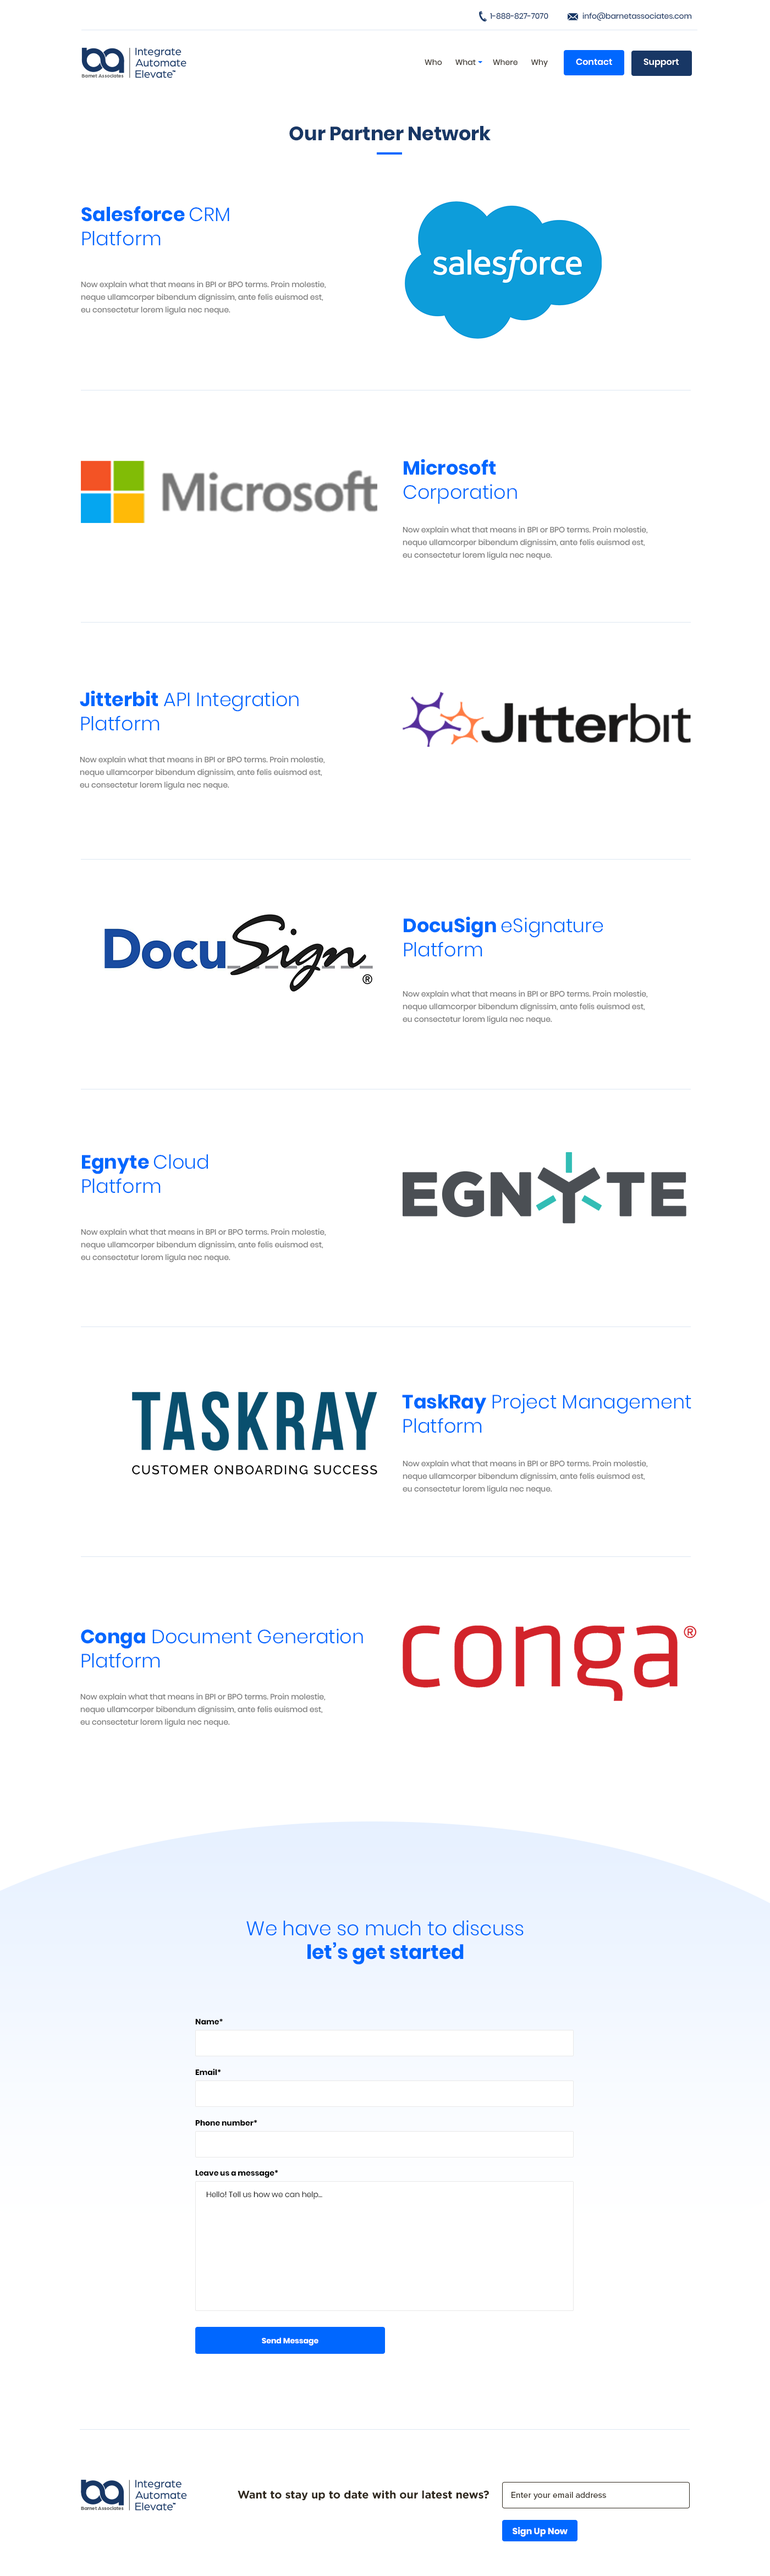
<style>
.page{position:relative;width:770px;height:2576px;background:#ffffff}
.page>*{position:absolute;margin:0}
.t1{font:7.7px "Poppins-Regular";color:#183765}
.t2{font:7.7px "Poppins-Regular";color:#2f281e}
.t3{font:8.8px "Poppins-SemiBold";color:#ffffff}
.t4{font:19.2px "Poppins-Bold";color:#183765}
.t5{font:19.2px/24.2px "Poppins-Light";color:#0067ff}
.t6{font:19.2px/24.2px "Poppins-Bold";color:#0067ff}
.t7{font:7.7px/12.6px "Poppins-Regular";color:#737373}
.t8{font:19.8px "Poppins-Light";color:#0067ff}
.t9{font:19.8px "Poppins-Bold";color:#0067ff}
.t10{font:7.7px "Poppins-Bold";color:#000000}
.t11{font:7.7px "Poppins-Light";color:#000000}
.t12{font:7.7px "Poppins-Bold";color:#ffffff}
.t13{font:11px "Gotham-Bold";color:#2f281e}
.t14{font:8.8px "ProximaNova-Regular";color:#2f281e}
.t15{font:8.8px "Poppins-Bold";color:#ffffff}
</style>
<div class="page">
<p class="t1" style="left:490px;top:13px;width:58px;height:6px">1-888-827-7070</p>
<p class="t1" style="left:582px;top:12px;width:110px;height:9px">info@barnetassociates.com</p>
<p class="t2" style="left:425px;top:59px;width:123px;height:8px">Who       What         Where       Why</p>
<p class="t3" style="left:576px;top:58px;width:36px;height:7px">Contact</p>
<p class="t3" style="left:643px;top:58px;width:36px;height:10px">Support</p>
<p class="t4" style="left:289px;top:126px;width:202px;height:15px">Our Partner Network</p>
<p class="t5" style="left:81px;top:206px;width:148px;height:40px"><span class="t6">Salesforce </span>CRM <br>Platform</p>
<p class="t7" style="left:81px;top:281px;width:245px;height:34px">Now explain what that means in BPI or BPO terms. Proin molestie, neque ullamcorper bibendum dignissim, ante felis euismod est, eu consectetur lorem ligula nec neque.</p>
<p class="t5" style="left:403px;top:459px;width:114px;height:45px"><span class="t6">Microsoft</span> <br>Corporation</p>
<p class="t7" style="left:403px;top:526px;width:245px;height:34px">Now explain what that means in BPI or BPO terms. Proin molestie, neque ullamcorper bibendum dignissim, ante felis euismod est, eu consectetur lorem ligula nec neque.</p>
<p class="t5" style="left:80px;top:690px;width:219px;height:41px"><span class="t6">Jitterbit</span> API Integration Platform</p>
<p class="t7" style="left:80px;top:756px;width:245px;height:34px">Now explain what that means in BPI or BPO terms. Proin molestie, neque ullamcorper bibendum dignissim, ante felis euismod est, eu consectetur lorem ligula nec neque.</p>
<p class="t5" style="left:404px;top:916px;width:199px;height:41px"><span class="t6">DocuSign </span>eSignature Platform</p>
<p class="t7" style="left:403px;top:990px;width:245px;height:34px">Now explain what that means in BPI or BPO terms. Proin molestie, neque ullamcorper bibendum dignissim, ante felis euismod est, eu consectetur lorem ligula nec neque.</p>
<p class="t5" style="left:82px;top:1154px;width:126px;height:39px"><span class="t6">Egnyte </span>Cloud<br>Platform</p>
<p class="t7" style="left:81px;top:1229px;width:245px;height:33px">Now explain what that means in BPI or BPO terms. Proin molestie, neque ullamcorper bibendum dignissim, ante felis euismod est, eu consectetur lorem ligula nec neque.</p>
<p class="t5" style="left:402px;top:1394px;width:289px;height:39px"><span class="t6">TaskRay</span> Project Management Platform</p>
<p class="t7" style="left:403px;top:1460px;width:245px;height:34px">Now explain what that means in BPI or BPO terms. Proin molestie, neque ullamcorper bibendum dignissim, ante felis euismod est, eu consectetur lorem ligula nec neque.</p>
<p class="t5" style="left:81px;top:1628px;width:282px;height:40px"><span class="t6">Conga</span> Document Generation Platform</p>
<p class="t7" style="left:80px;top:1693px;width:246px;height:34px">Now explain what that means in BPI or BPO terms. Proin molestie, neque ullamcorper bibendum dignissim, ante felis euismod est, eu consectetur lorem ligula nec neque.</p>
<p class="t8" style="left:246px;top:1920px;width:278px;height:44px;text-align:center">We have so much to discuss <br><span class="t9">let’s get started</span></p>
<p class="t10" style="left:195px;top:2018px;width:28px;height:6px">Name*</p>
<p class="t10" style="left:195px;top:2068px;width:26px;height:7px">Email*</p>
<p class="t10" style="left:195px;top:2120px;width:62px;height:6px">Phone number*</p>
<p class="t10" style="left:195px;top:2170px;width:83px;height:8px">Leave us a message*</p>
<p class="t11" style="left:206px;top:2191px;width:116px;height:8px">Hello! Tell us how we can help…</p>
<p class="t12" style="left:262px;top:2337px;width:56px;height:9px">Send Message</p>
<p class="t13" style="left:238px;top:2490px;width:251px;height:11px">Want to stay up to date with our latest news?</p>
<p class="t14" style="left:511px;top:2492px;width:95px;height:8px">Enter your email address</p>
<p class="t15" style="left:513px;top:2527px;width:55px;height:10px">Sign Up Now</p>
</div>
